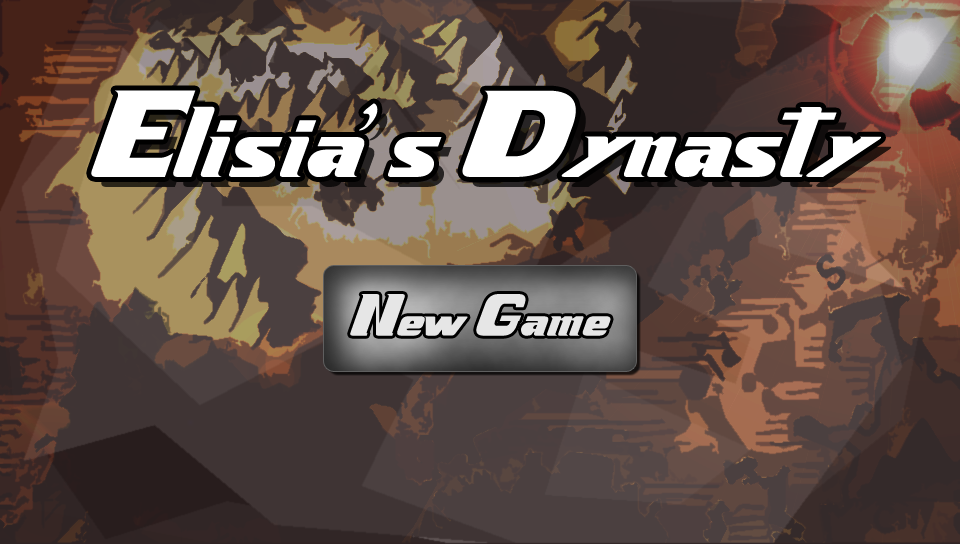
<style>
.page{position:relative;width:960px;height:544px}
.page>*{position:absolute;margin:0}
.t1{font:95.2px "-Xenogears";color:#ffffff}
.t2{font:45.7px "-Xenogears";color:#e6e6e6}
</style>
<div class="page">
<p class="t1" style="left:91px;top:90px;width:790px;height:87px">Elisia’s Dynasty</p>
<p class="t2" style="left:350px;top:294px;width:261px;height:42px">New Game</p>
</div>
